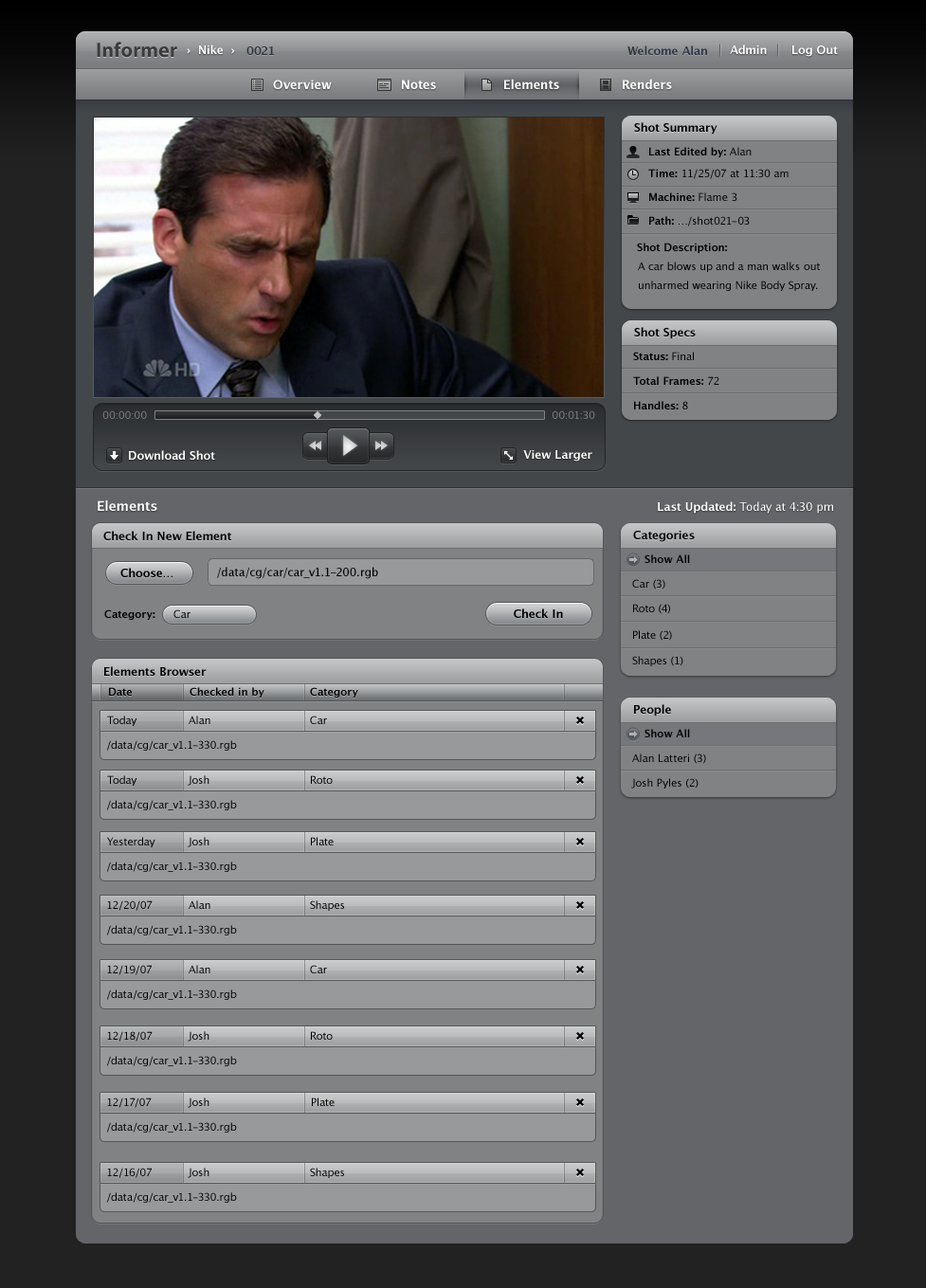
<style>
.page{position:relative;width:926px;height:1288px}
.page>*{position:absolute;margin:0}
.t1{font:20.8px "MyriadPro-Bold";color:#3c3c3c}
.t2{font:11.4px "LucidaGrande-Bold";color:#ffffff}
.t3{font:11.4px "LucidaGrande-Bold";color:#303643}
.t4{font:12.3px "LucidaGrande-Bold";color:#ffffff}
.t5{font:11.4px "LucidaGrande-Bold";color:#000000}
.t6{font:10.4px "LucidaGrande-Bold";color:#000000}
.t7{font:10.4px "LucidaGrande";color:#000000}
.t8{font:10.4px/18.6px "LucidaGrande";color:#000000}
.t9{font:10.4px "LucidaGrande";color:#808284}
.t10{font:13.3px "LucidaGrande-Bold";color:#ffffff}
.t11{font:11.4px "LucidaGrande";color:#ffffff}
.t12{font:10.4px "LucidaGrande-Bold";color:#020202}
.t13{font:11.4px "LucidaGrande";color:#000000}
</style>
<div class="page">
<p class="t1" style="left:97px;top:42px;width:80px;height:16px">Informer</p>
<p class="t2" style="left:187px;top:45px;width:48px;height:9px">›  Nike  ›</p>
<p class="t3" style="left:246px;top:46px;width:29px;height:9px">0021</p>
<p class="t3" style="left:627px;top:45px;width:80px;height:10px">Welcome Alan</p>
<p class="t2" style="left:730px;top:45px;width:37px;height:9px">Admin</p>
<p class="t2" style="left:792px;top:45px;width:46px;height:12px">Log Out</p>
<p class="t4" style="left:273px;top:80px;width:59px;height:9px">Overview</p>
<p class="t4" style="left:402px;top:80px;width:34px;height:9px">Notes</p>
<p class="t4" style="left:504px;top:79px;width:55px;height:10px">Elements</p>
<p class="t4" style="left:623px;top:79px;width:49px;height:10px">Renders</p>
<p class="t5" style="left:634px;top:122px;width:83px;height:13px">Shot Summary</p>
<p class="t6" style="left:649px;top:147px;width:103px;height:10px">Last Edited by:<span class="t7"> Alan</span></p>
<p class="t7" style="left:648px;top:169px;width:140px;height:10px"><span class="t6">Time: </span>11/25/07 at 11:30 am</p>
<p class="t6" style="left:649px;top:192px;width:88px;height:9px">Machine: <span class="t7">Flame 3</span></p>
<p class="t7" style="left:649px;top:216px;width:101px;height:10px"><span class="t6">Path: </span>…/shot021-03</p>
<p class="t6" style="left:637px;top:243px;width:90px;height:10px">Shot Description:</p>
<p class="t8" style="left:638px;top:262px;width:182px;height:29px">A car blows up and a man walks out unharmed wearing Nike Body Spray.</p>
<p class="t5" style="left:634px;top:327px;width:62px;height:12px">Shot Specs</p>
<p class="t6" style="left:633px;top:352px;width:61px;height:8px">Status:<span class="t7"> Final</span></p>
<p class="t6" style="left:633px;top:376px;width:86px;height:9px">Total Frames:<span class="t7"> 72</span></p>
<p class="t6" style="left:634px;top:401px;width:54px;height:8px">Handles:<span class="t7"> 8</span></p>
<p class="t9" style="left:102px;top:410px;width:45px;height:9px">00:00:00</p>
<p class="t9" style="left:552px;top:410px;width:43px;height:9px">00:01:30</p>
<p class="t2" style="left:129px;top:450px;width:86px;height:10px">Download Shot</p>
<p class="t2" style="left:523px;top:450px;width:69px;height:12px">View Larger</p>
<p class="t10" style="left:98px;top:500px;width:59px;height:11px">Elements</p>
<p class="t11" style="left:658px;top:501px;width:175px;height:13px"><span class="t2">Last Updated: </span>Today at 4:30 pm</p>
<p class="t5" style="left:103px;top:531px;width:128px;height:9px">Check In New Element</p>
<p class="t5" style="left:633px;top:531px;width:62px;height:11px">Categories</p>
<p class="t12" style="left:644px;top:554px;width:46px;height:9px">Show All</p>
<p class="t5" style="left:120px;top:568px;width:52px;height:9px">Choose…</p>
<p class="t13" style="left:217px;top:567px;width:161px;height:12px">/data/cg/car/car_v1.1-200.rgb</p>
<p class="t7" style="left:632px;top:579px;width:33px;height:10px">Car (3)</p>
<p class="t7" style="left:633px;top:604px;width:37px;height:10px">Roto (4)</p>
<p class="t6" style="left:104px;top:609px;width:51px;height:11px">Category:</p>
<p class="t5" style="left:514px;top:608px;width:49px;height:10px">Check In</p>
<p class="t7" style="left:633px;top:630px;width:39px;height:11px">Plate (2)</p>
<p class="t7" style="left:632px;top:656px;width:51px;height:10px">Shapes (1)</p>
<p class="t5" style="left:104px;top:666px;width:103px;height:10px">Elements Browser</p>
<p class="t6" style="left:109px;top:687px;width:23px;height:9px">Date</p>
<p class="t6" style="left:190px;top:687px;width:74px;height:10px">Checked in by</p>
<p class="t6" style="left:310px;top:687px;width:48px;height:10px">Category</p>
<p class="t5" style="left:634px;top:704px;width:37px;height:12px">People</p>
<p class="t7" style="left:107px;top:715px;width:30px;height:11px">Today</p>
<p class="t7" style="left:189px;top:715px;width:21px;height:9px">Alan</p>
<p class="t7" style="left:310px;top:715px;width:17px;height:9px">Car</p>
<p class="t12" style="left:644px;top:729px;width:46px;height:8px">Show All</p>
<p class="t7" style="left:107px;top:740px;width:130px;height:11px">/data/cg/car_v1.1-330.rgb</p>
<p class="t7" style="left:632px;top:753px;width:74px;height:11px">Alan Latteri (3)</p>
<p class="t7" style="left:107px;top:775px;width:30px;height:11px">Today</p>
<p class="t7" style="left:188px;top:775px;width:21px;height:11px">Josh</p>
<p class="t7" style="left:311px;top:775px;width:22px;height:9px">Roto</p>
<p class="t7" style="left:631px;top:778px;width:67px;height:10px">Josh Pyles (2)</p>
<p class="t7" style="left:107px;top:800px;width:130px;height:10px">/data/cg/car_v1.1-330.rgb</p>
<p class="t7" style="left:107px;top:837px;width:48px;height:10px">Yesterday</p>
<p class="t7" style="left:188px;top:837px;width:21px;height:10px">Josh</p>
<p class="t7" style="left:311px;top:837px;width:23px;height:8px">Plate</p>
<p class="t7" style="left:107px;top:861px;width:130px;height:11px">/data/cg/car_v1.1-330.rgb</p>
<p class="t7" style="left:107px;top:900px;width:46px;height:11px">12/20/07</p>
<p class="t7" style="left:189px;top:900px;width:21px;height:9px">Alan</p>
<p class="t7" style="left:310px;top:900px;width:34px;height:11px">Shapes</p>
<p class="t7" style="left:107px;top:925px;width:130px;height:10px">/data/cg/car_v1.1-330.rgb</p>
<p class="t7" style="left:107px;top:965px;width:45px;height:10px">12/19/07</p>
<p class="t7" style="left:189px;top:965px;width:21px;height:8px">Alan</p>
<p class="t7" style="left:310px;top:965px;width:17px;height:8px">Car</p>
<p class="t7" style="left:107px;top:989px;width:130px;height:11px">/data/cg/car_v1.1-330.rgb</p>
<p class="t7" style="left:107px;top:1031px;width:46px;height:10px">12/18/07</p>
<p class="t7" style="left:188px;top:1031px;width:21px;height:10px">Josh</p>
<p class="t7" style="left:311px;top:1031px;width:22px;height:9px">Roto</p>
<p class="t7" style="left:107px;top:1056px;width:130px;height:10px">/data/cg/car_v1.1-330.rgb</p>
<p class="t7" style="left:107px;top:1097px;width:45px;height:11px">12/17/07</p>
<p class="t7" style="left:188px;top:1097px;width:21px;height:11px">Josh</p>
<p class="t7" style="left:312px;top:1097px;width:23px;height:9px">Plate</p>
<p class="t7" style="left:107px;top:1122px;width:130px;height:10px">/data/cg/car_v1.1-330.rgb</p>
<p class="t7" style="left:107px;top:1168px;width:45px;height:10px">12/16/07</p>
<p class="t7" style="left:188px;top:1168px;width:21px;height:10px">Josh</p>
<p class="t7" style="left:310px;top:1168px;width:34px;height:10px">Shapes</p>
<p class="t7" style="left:107px;top:1192px;width:130px;height:11px">/data/cg/car_v1.1-330.rgb</p>
</div>
